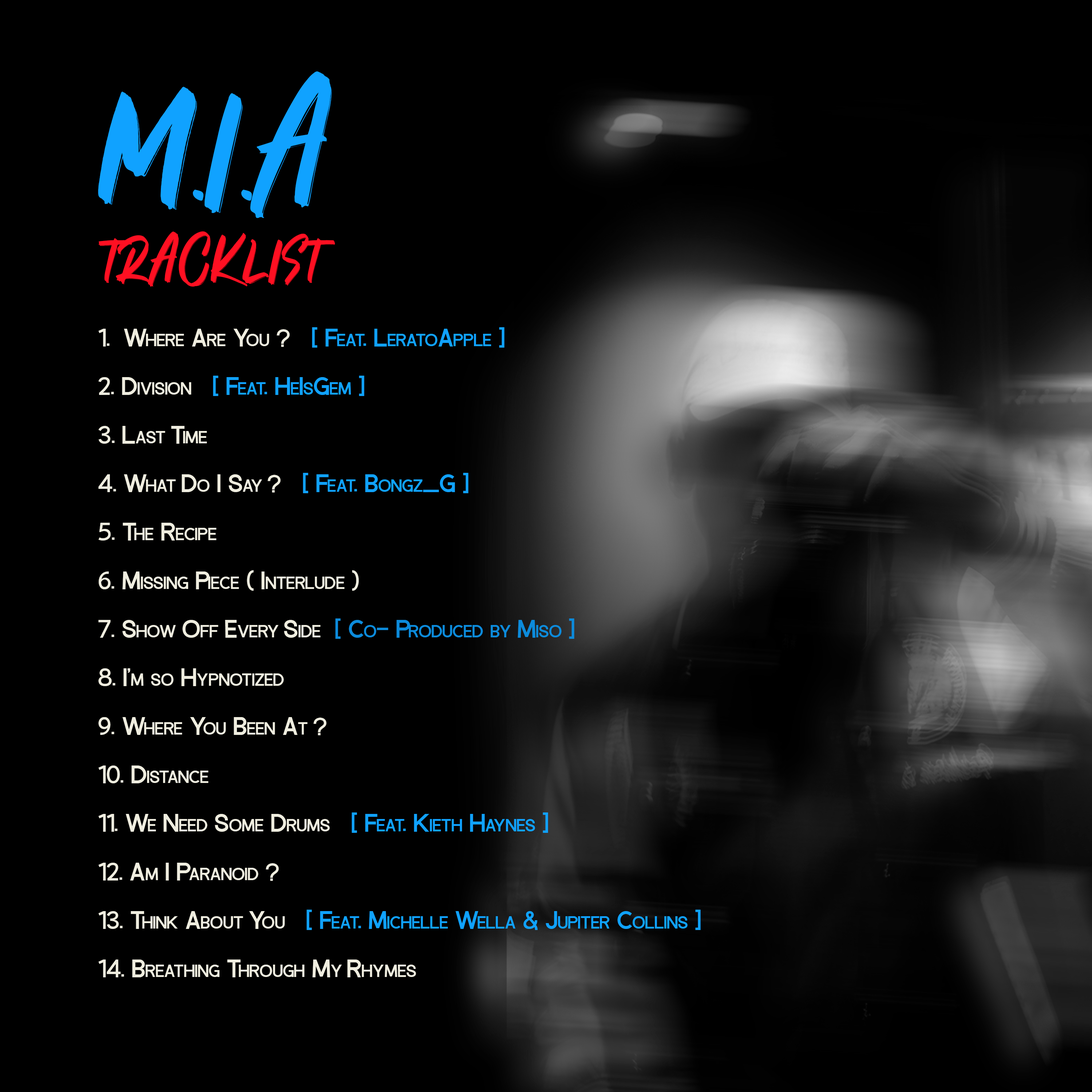
<style>
.page{position:relative;width:1092px;height:1092px;background:#000000}
.page>*{position:absolute;margin:0}
.t1{font:227.1px "MathewRohas";color:#10a2ff;text-transform:uppercase}
.t2{font:85.4px "MathewRohas";color:#ff1022;text-transform:uppercase}
.t3{font:24.3px/48.5px "BlackPro-Bold";color:#efeddf;font-variant:small-caps}
.t4{font:24.3px/48.5px "BlackPro-Bold";color:#10a2ff;font-variant:small-caps}
.t5{font:24.3px/48.5px "BlackPro-Bold";color:#0c8bdb;font-variant:small-caps}
</style>
<div class="page">
<p class="t1" style="left:98px;top:71px;width:234px;height:147px">M.I.A</p>
<p class="t2" style="left:98px;top:231px;width:237px;height:56px">Tracklist</p>
<p class="t3" style="left:98px;top:327px;width:603px;height:650px">Where Are You ?   <span class="t4">[ Feat. LeratoApple ]<br></span>2. Division   <span class="t4">[ Feat. HeIsGem ]<br></span>3. Last Time <br>4. What Do I Say ?   <span class="t4">[ Feat. Bongz_G ]<br></span>5. The Recipe <br>6. Missing Piece ( Interlude )<br>7. Show Off Every Side <span class="t5"> [ Co- Produced by  Miso ]<br></span>8. I’m so Hypnotized<br>9. Where You Been At ?<br>10. Distance<br>11. We Need Some Drums   <span class="t4">[ Feat. Kieth Haynes ]<br></span>12. Am I Paranoid ?<br>13. Think About You   <span class="t4">[ Feat. Michelle Wella &amp; Jupiter Collins ]<br></span>14. Breathing Through My Rhymes</p>
</div>
